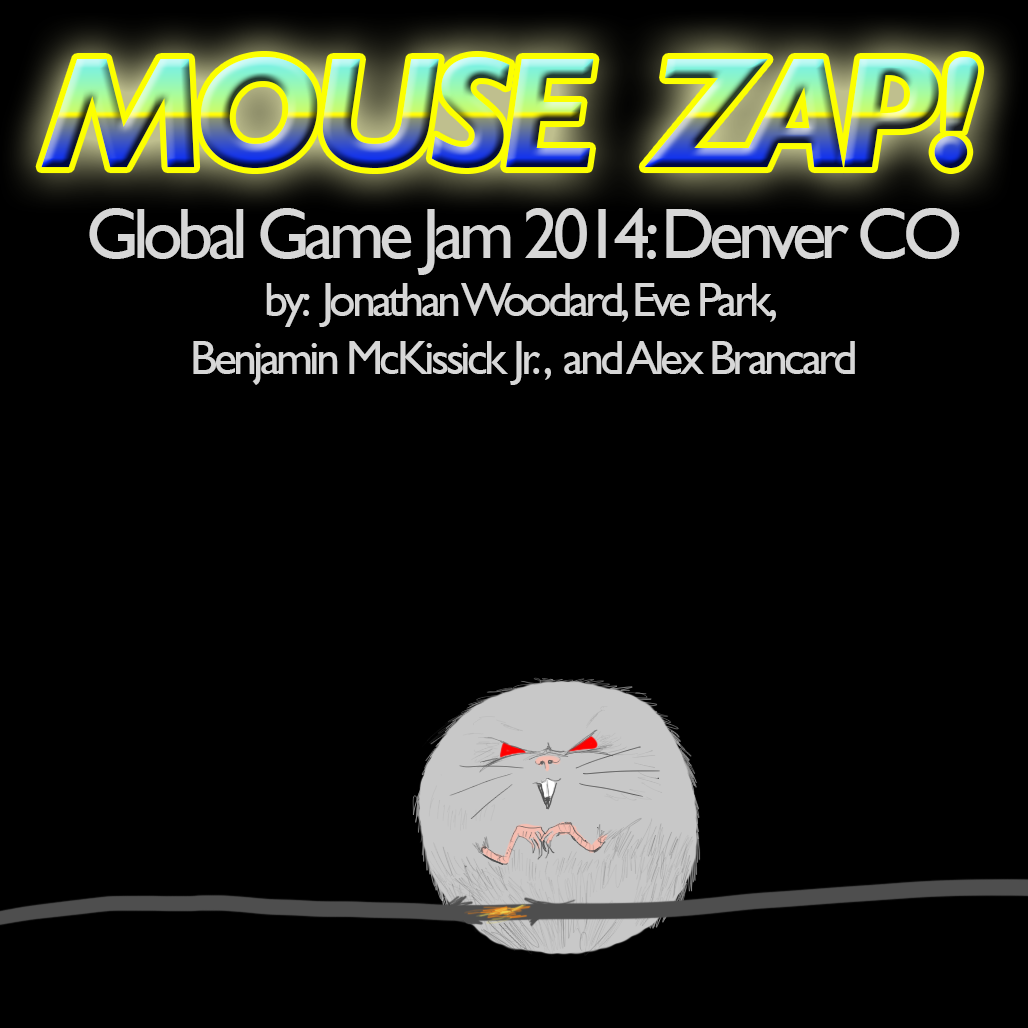
<style>
.page{position:relative;width:1028px;height:1028px;background:#000000}
.page>*{position:absolute;margin:0}
.t1{font:160px "GillSans-BoldItalic";letter-spacing:-0.08em}
.t2{font:48px "GillSans";letter-spacing:-0.08em;color:#d7d7d7}
.t3{font:72px "GillSans";letter-spacing:-0.08em;color:#d7d7d7}
</style>
<div class="page">
<p class="t1" style="left:41px;top:57px;width:938px;height:111px">MOUSE  ZAP!</p>
<p class="t2" style="left:89px;top:208px;width:871px;height:177px;text-align:center"><span class="t3">Global Game Jam 2014: Denver CO<br></span>by:  Jonathan Woodard, Eve Park, <br>Benjamin McKissick Jr. ,  and Alex Brancard</p>
</div>
